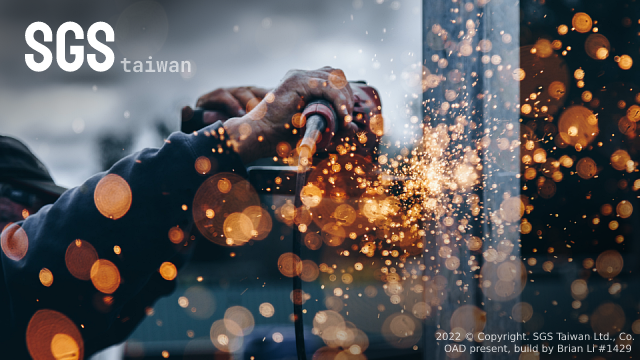
<style>
.page{position:relative;width:640px;height:360px}
.page>*{position:absolute;margin:0}
.t1{font:70px "Staatliches-Regular";color:#ffffff}
.t2{font:20px "JetBrainsMono-Bold";color:#cfd3d7}
.t3{font:10px "DejaVuSans";color:#ced1d2}
</style>
<div class="page">
<p class="t1" style="left:24px;top:21px;width:91px;height:51px">SGS</p>
<p class="t2" style="left:120px;top:56px;width:71px;height:17px">taiwan</p>
<p class="t3" style="left:436px;top:332px;width:198px;height:23px;text-align:right">2022 © Copyright. SGS Taiwan Ltd., Co.<br>OAD present, build by Brian Li #1429</p>
</div>
